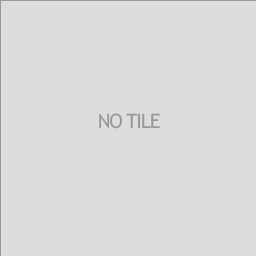
<style>
.page{position:relative;width:256px;height:256px;background:#dddddd}
.page>*{position:absolute;margin:0}
.t1{font:20px "TrebuchetMS";letter-spacing:-0.06em;color:#989898;text-transform:uppercase}
</style>
<div class="page">
<p class="t1" style="left:99px;top:113px;width:61px;height:16px">NO TILE</p>
</div>
